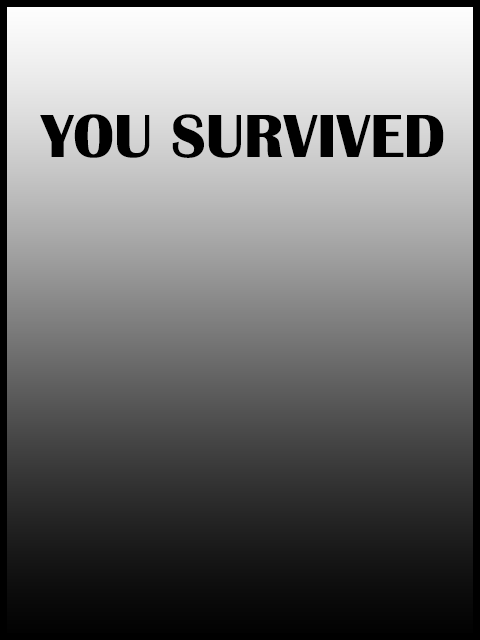
<style>
.page{position:relative;width:480px;height:640px}
.page>*{position:absolute;margin:0}
.t1{font:63px "BritannicBold";color:#000000}
</style>
<div class="page">
<p class="t1" style="left:40px;top:114px;width:404px;height:44px">YOU SURVIVED</p>
</div>
